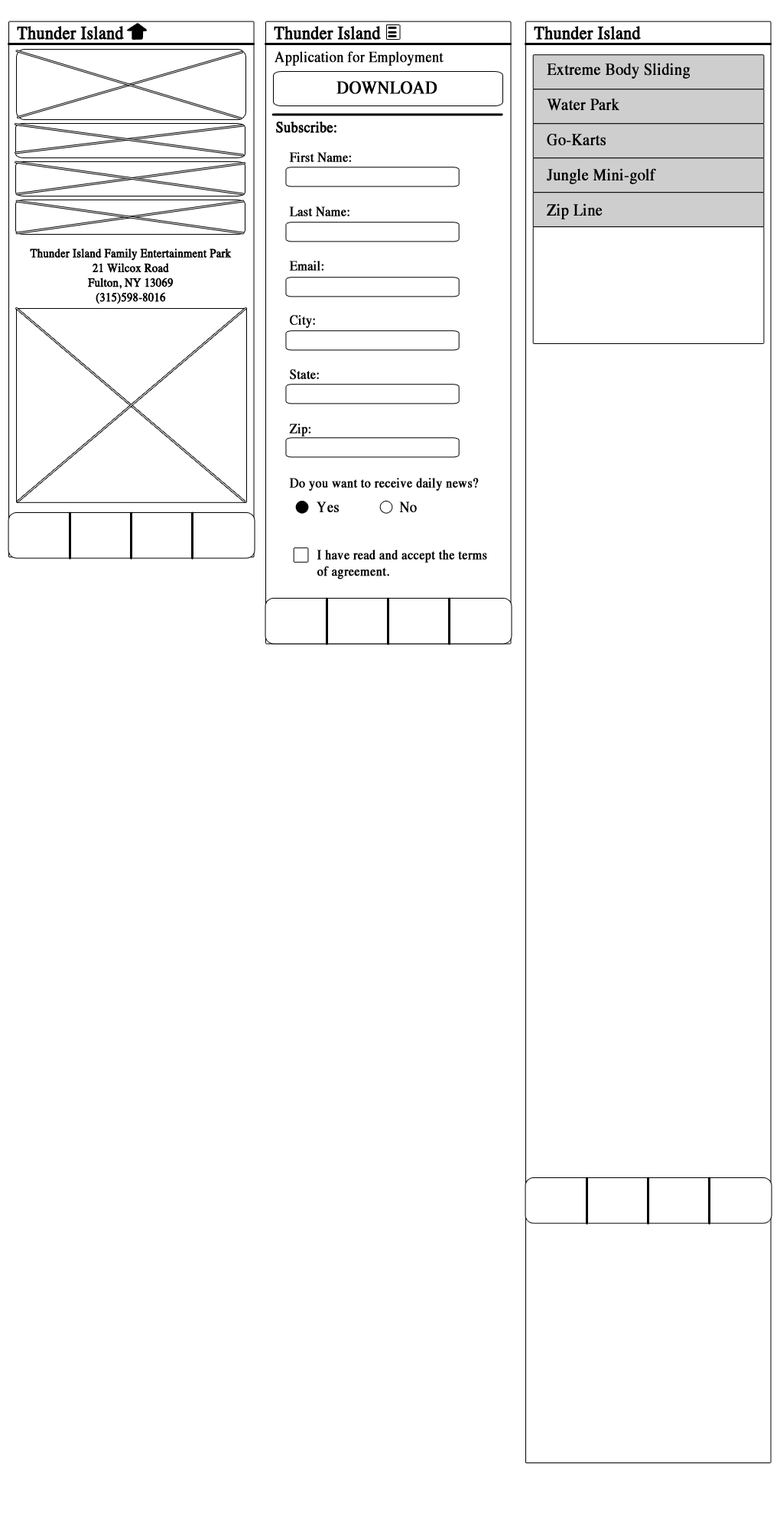
<style>
.page{position:relative;width:780px;height:1529px;background:#ffffff}
.page>*{position:absolute;margin:0}
.t1{font:18.3px "Times-Roman";color:#000000;font-weight:bold;scale:0.9 1}
.t2{font:15.3px "Times-Roman";color:#000000;font-weight:bold;scale:0.9 1}
.t3{font:16.8px/35.2px "Times-Roman";color:#000000;font-weight:bold;scale:0.9 1}
.t4{font:13.8px/54.3px "Times-Roman";color:#000000;font-weight:bold;scale:0.9 1}
.t5{font:12.2px "Times-Roman";color:#000000;font-weight:bold;scale:0.9 1}
.t6{font:13.8px "Times-Roman";color:#000000;font-weight:bold;scale:0.9 1}
</style>
<div class="page">
<p class="t1" style="left:17px;top:26px;width:107px;height:14px">Thunder Island</p>
<p class="t1" style="left:274px;top:26px;width:107px;height:14px">Thunder Island</p>
<p class="t1" style="left:534px;top:26px;width:107px;height:14px">Thunder Island</p>
<p class="t2" style="left:274px;top:51px;width:169px;height:15px">Application for Employment</p>
<p class="t3" style="left:547px;top:63px;width:143px;height:156px">Extreme Body Sliding<br>Water Park<br>Go-Karts<br>Jungle Mini-golf<br>Zip Line</p>
<p class="t1" style="left:336px;top:81px;width:101px;height:13px">DOWNLOAD</p>
<p class="t2" style="left:276px;top:122px;width:60px;height:11px">Subscribe:</p>
<p class="t4" style="left:289px;top:152px;width:190px;height:339px">First Name:<br>Last Name:<br>Email:<br>City:<br>State:<br>Zip:<br>Do you want to receive daily news?</p>
<p class="t5" style="left:30px;top:248px;width:202px;height:56px;text-align:center">Thunder Island Family Entertainment Park<br>21 Wilcox Road<br>Fulton, NY 13069<br>(315)598-8016</p>
<p class="t2" style="left:317px;top:502px;width:100px;height:11px">Yes   No</p>
<p class="t6" style="left:317px;top:550px;width:170px;height:30px">I have read and accept the terms<br> of agreement.</p>
</div>
